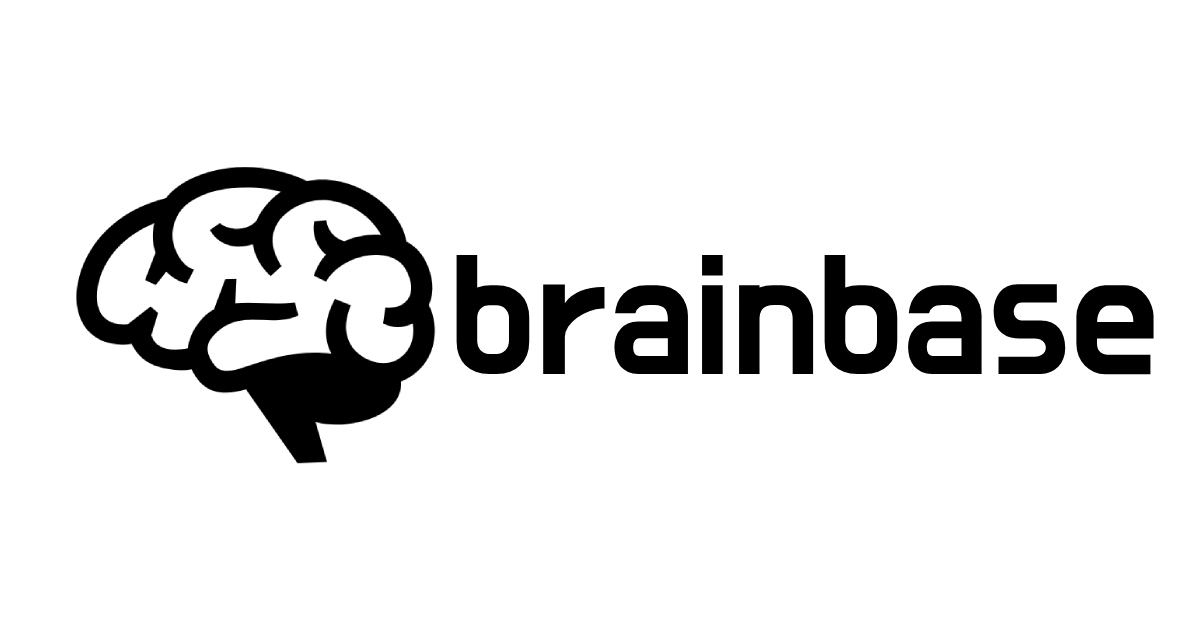
<style>
.page{position:relative;width:1200px;height:630px;background:#ffffff}
.page>*{position:absolute;margin:0}
.t1{font:174.6px "DoHyeon-Regular";color:#000000}
</style>
<div class="page">
<p class="t1" style="left:456px;top:255px;width:698px;height:120px">brainbase</p>
</div>
